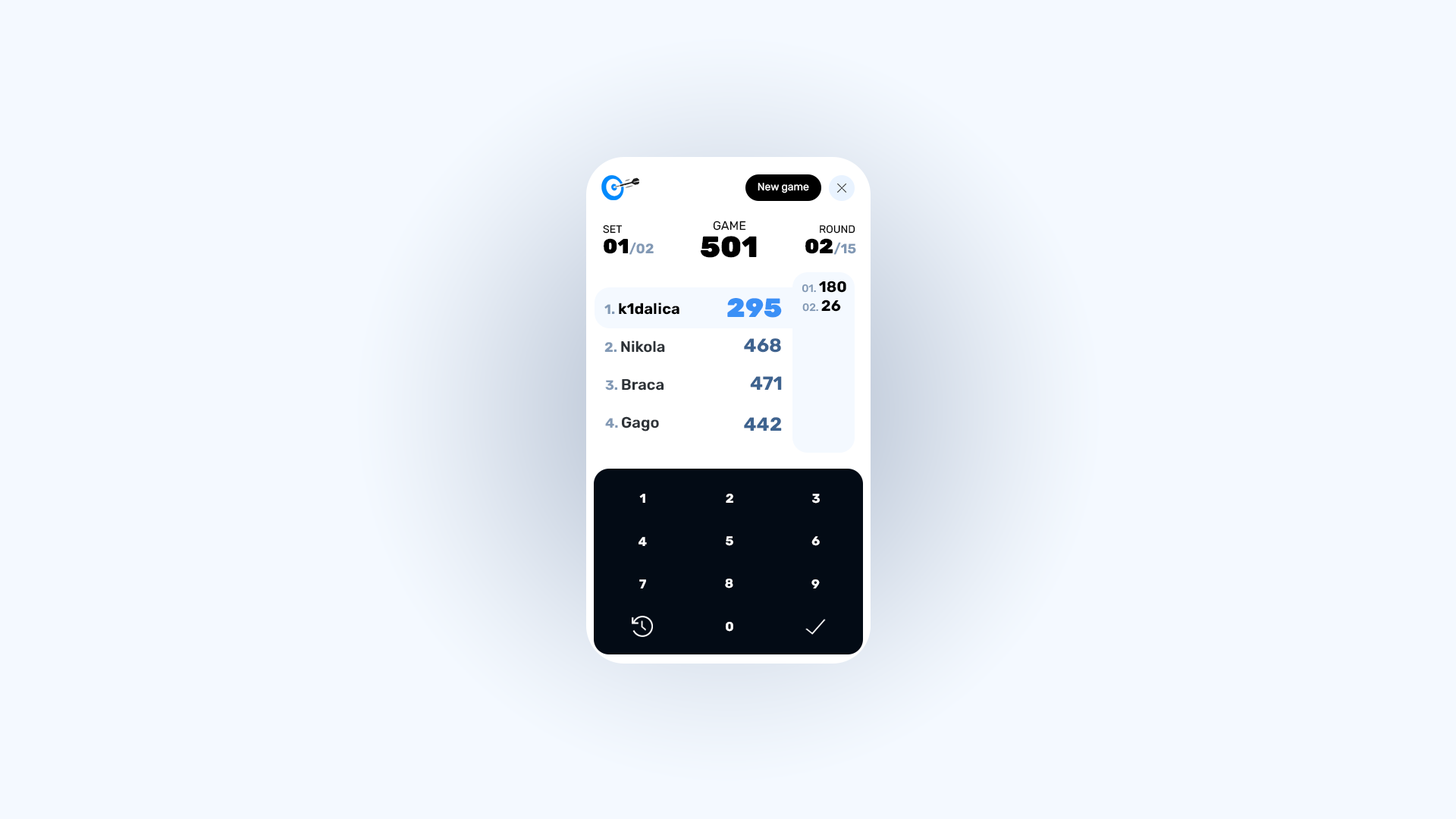
<style>
.page{position:relative;width:1456px;height:819px;background:#f4f9ff}
.page>*{position:absolute;margin:0}
.t1{font:10.6px "Rubik-Regular";color:#ffffff}
.t2{font:12.1px "Rubik-Regular";color:#000000}
.t3{font:10.6px "Rubik-Regular";color:#000000}
.t4{font:13.6px "Rubik-Bold";color:#8299b5}
.t5{font:20.5px "Rubik-Black";color:#000000}
.t6{font:29.6px "Rubik-Black";color:#000000}
.t7{font:10.6px "Rubik-Medium";color:#8299b5}
.t8{font:15.2px "Rubik-Bold";color:#000000}
.t9{font:26.5px "Rubik-Black";color:#3b90f6}
.t10{font:15.2px "Rubik-SemiBold";color:#2d3237}
.t11{font:19px "Rubik-Bold";color:#3f638f}
.t12{font:19px "Rubik-Bold";color:#3e638f}
.t13{font:12.7px "Rubik-Bold";color:#ffffff}
</style>
<div class="page">
<p class="t1" style="left:758px;top:183px;width:51px;height:10px">New game</p>
<p class="t2" style="left:713px;top:221px;width:33px;height:10px">GAME</p>
<p class="t3" style="left:603px;top:224px;width:19px;height:10px">SET</p>
<p class="t3" style="left:820px;top:224px;width:35px;height:10px">ROUND</p>
<p class="t4" style="left:604px;top:238px;width:50px;height:17px"><span class="t5">01</span>/02</p>
<p class="t6" style="left:701px;top:236px;width:56px;height:22px">501</p>
<p class="t4" style="left:805px;top:238px;width:51px;height:17px"><span class="t5">02</span>/15</p>
<p class="t7" style="left:802px;top:281px;width:44px;height:12px">01. <span class="t8">180</span></p>
<p class="t8" style="left:604px;top:303px;width:75px;height:12px"><span class="t4">1. </span>k1dalica</p>
<p class="t9" style="left:727px;top:298px;width:55px;height:20px">295</p>
<p class="t7" style="left:802px;top:300px;width:39px;height:12px">02. <span class="t8">26</span></p>
<p class="t10" style="left:604px;top:340px;width:61px;height:13px"><span class="t4">2. </span>Nikola</p>
<p class="t11" style="left:744px;top:338px;width:37px;height:15px">468</p>
<p class="t12" style="left:750px;top:376px;width:32px;height:14px">471</p>
<p class="t10" style="left:605px;top:379px;width:59px;height:12px"><span class="t4">3. </span>Braca</p>
<p class="t10" style="left:605px;top:416px;width:54px;height:15px"><span class="t4">4. </span>Gago</p>
<p class="t12" style="left:744px;top:417px;width:38px;height:14px">442</p>
<p class="t13" style="left:639px;top:494px;width:6px;height:9px">1</p>
<p class="t13" style="left:726px;top:494px;width:7px;height:9px">2</p>
<p class="t13" style="left:812px;top:494px;width:8px;height:10px">3</p>
<p class="t13" style="left:639px;top:537px;width:8px;height:9px">4</p>
<p class="t13" style="left:726px;top:536px;width:7px;height:10px">5</p>
<p class="t13" style="left:811px;top:536px;width:9px;height:10px">6</p>
<p class="t13" style="left:639px;top:579px;width:7px;height:9px">7</p>
<p class="t13" style="left:725px;top:579px;width:8px;height:9px">8</p>
<p class="t13" style="left:811px;top:579px;width:9px;height:9px">9</p>
<p class="t13" style="left:726px;top:622px;width:7px;height:10px">0</p>
</div>
